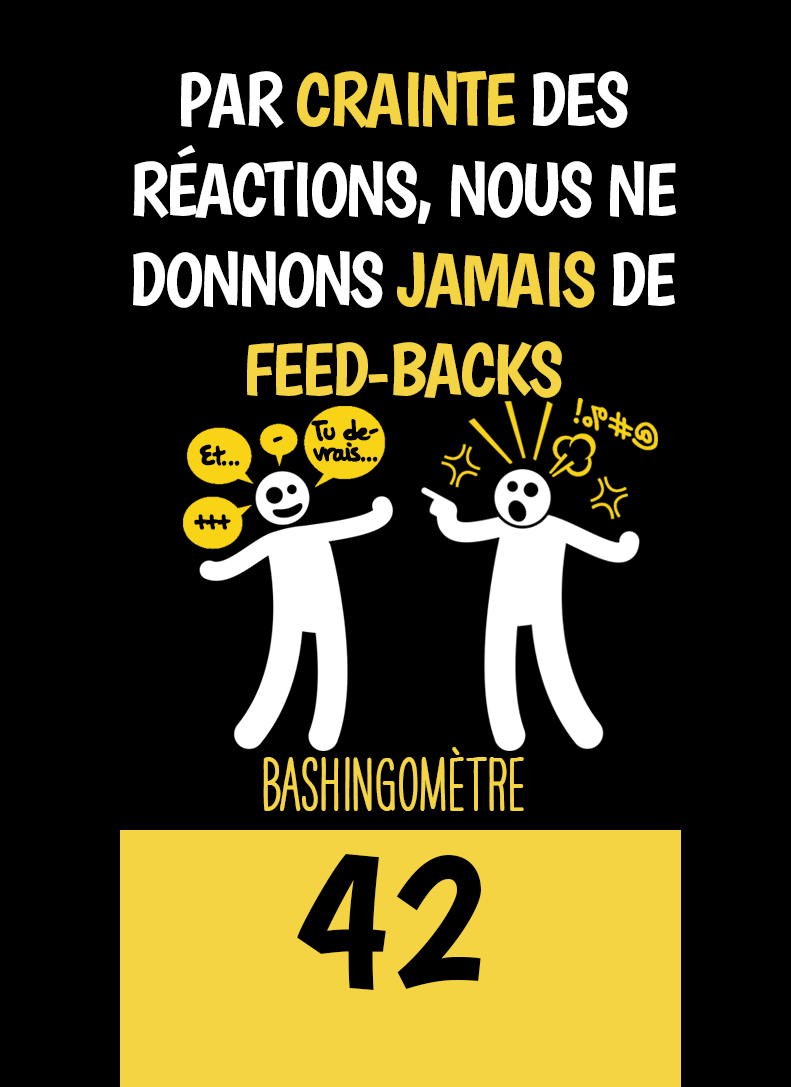
<style>
.page{position:relative;width:791px;height:1087px;background:#000000}
.page>*{position:absolute;margin:0}
.t1{font:75px "Boogaloo-Regular";letter-spacing:-0.04em;color:#ffffff}
.t2{font:75px "Boogaloo-Regular";letter-spacing:-0.04em;color:#f4d443}
.t3{font:33.3px "OakStreetW01-Regular";letter-spacing:-0.06em;color:#000000}
.t4{font:66.7px "HAVEANICEDAYTallW04-Bold";color:#f4d443}
.t5{font:200px "Boogaloo-Regular";color:#000000}
</style>
<div class="page">
<p class="t1" style="left:133px;top:71px;width:543px;height:327px;text-align:center">PAR <span class="t2">CRAINTE </span>DES <br>RÉACTIONS, NOUS NE DONNONS <span class="t2">JAMAIS </span>DE <span class="t2">FEED-BACKS</span></p>
<p class="t3" style="left:311px;top:419px;width:68px;height:43px">Tu devrais...</p>
<p class="t3" style="left:273px;top:436px;width:10px;height:7px">-</p>
<p class="t3" style="left:199px;top:444px;width:41px;height:22px">Et...</p>
<p class="t3" style="left:194px;top:514px;width:37px;height:16px">+++</p>
<p class="t4" style="left:263px;top:747px;width:261px;height:64px">BASHINgomètre</p>
<p class="t5" style="left:297px;top:854px;width:184px;height:136px">42</p>
</div>
